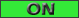
<style>
.page{position:relative;width:79px;height:18px;background:#34e938}
.page>*{position:absolute;margin:0}
.t1{font:18px "ErasITC-Bold";scale:0.96 1}
</style>
<div class="page">
<p class="t1" style="left:26px;top:2px;width:29px;height:13px">ON</p>
</div>
